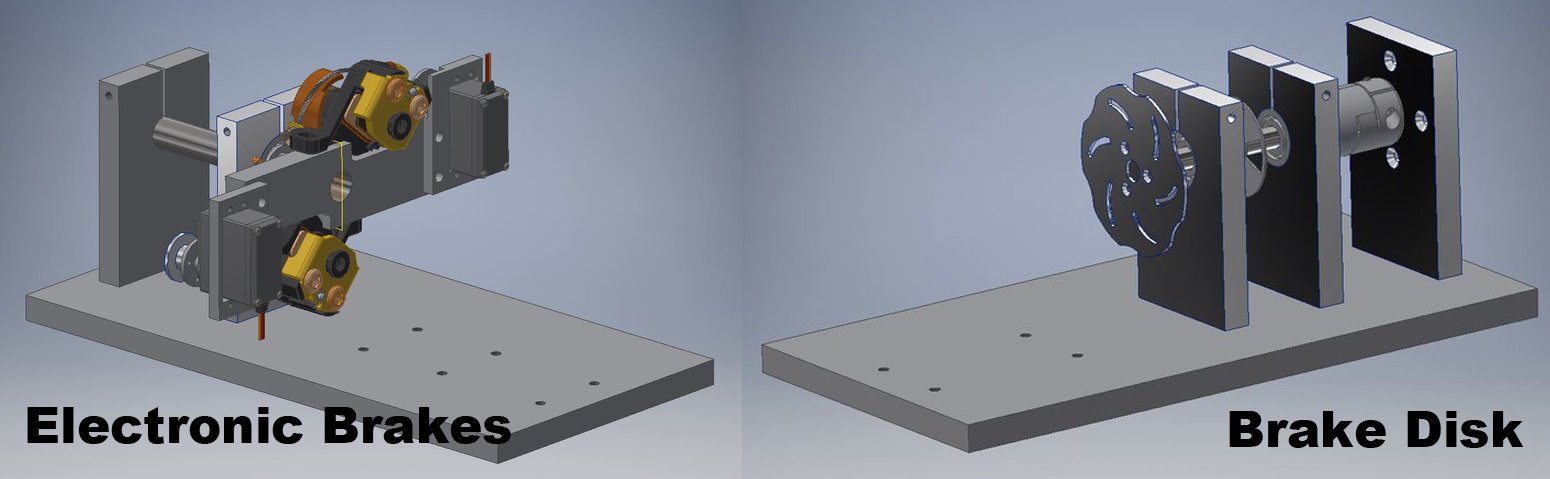
<style>
.page{position:relative;width:1550px;height:479px}
.page>*{position:absolute;margin:0}
.t1{font:50px "Arial-Black";color:#000000}
</style>
<div class="page">
<p class="t1" style="left:27px;top:407px;width:484px;height:37px">Electronic Brakes</p>
<p class="t1" style="left:1229px;top:411px;width:295px;height:37px">Brake Disk</p>
</div>
